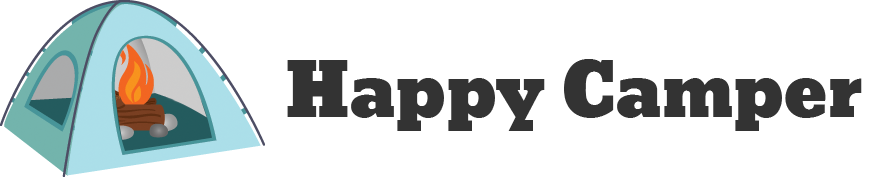
<style>
.page{position:relative;width:876px;height:177px;background:#ffffff}
.page>*{position:absolute;margin:0}
.t1{font:72px "Bevan";color:#333333}
</style>
<div class="page">
<p class="t1" style="left:287px;top:59px;width:575px;height:72px">Happy Camper</p>
</div>
